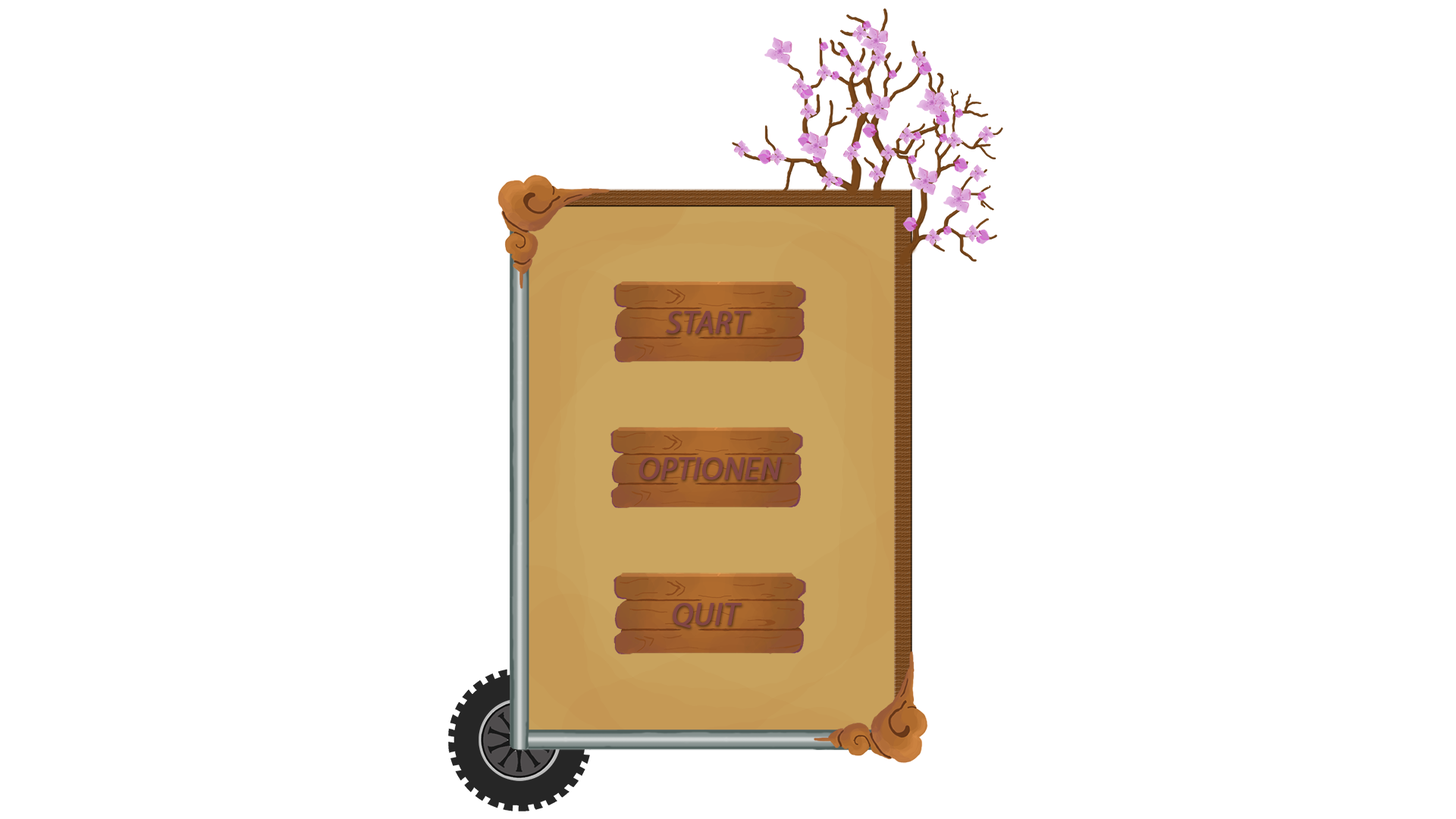
<style>
.page{position:relative;width:1456px;height:819px;background:#ffffff}
.page>*{position:absolute;margin:0}
.t1{font:32px "MyriadPro-It";color:#824644;font-weight:bold}
</style>
<div class="page">
<p class="t1" style="left:666px;top:311px;width:85px;height:23px">START</p>
<p class="t1" style="left:639px;top:457px;width:143px;height:23px">OPTIONEN</p>
<p class="t1" style="left:673px;top:603px;width:69px;height:25px">QUIT</p>
</div>
